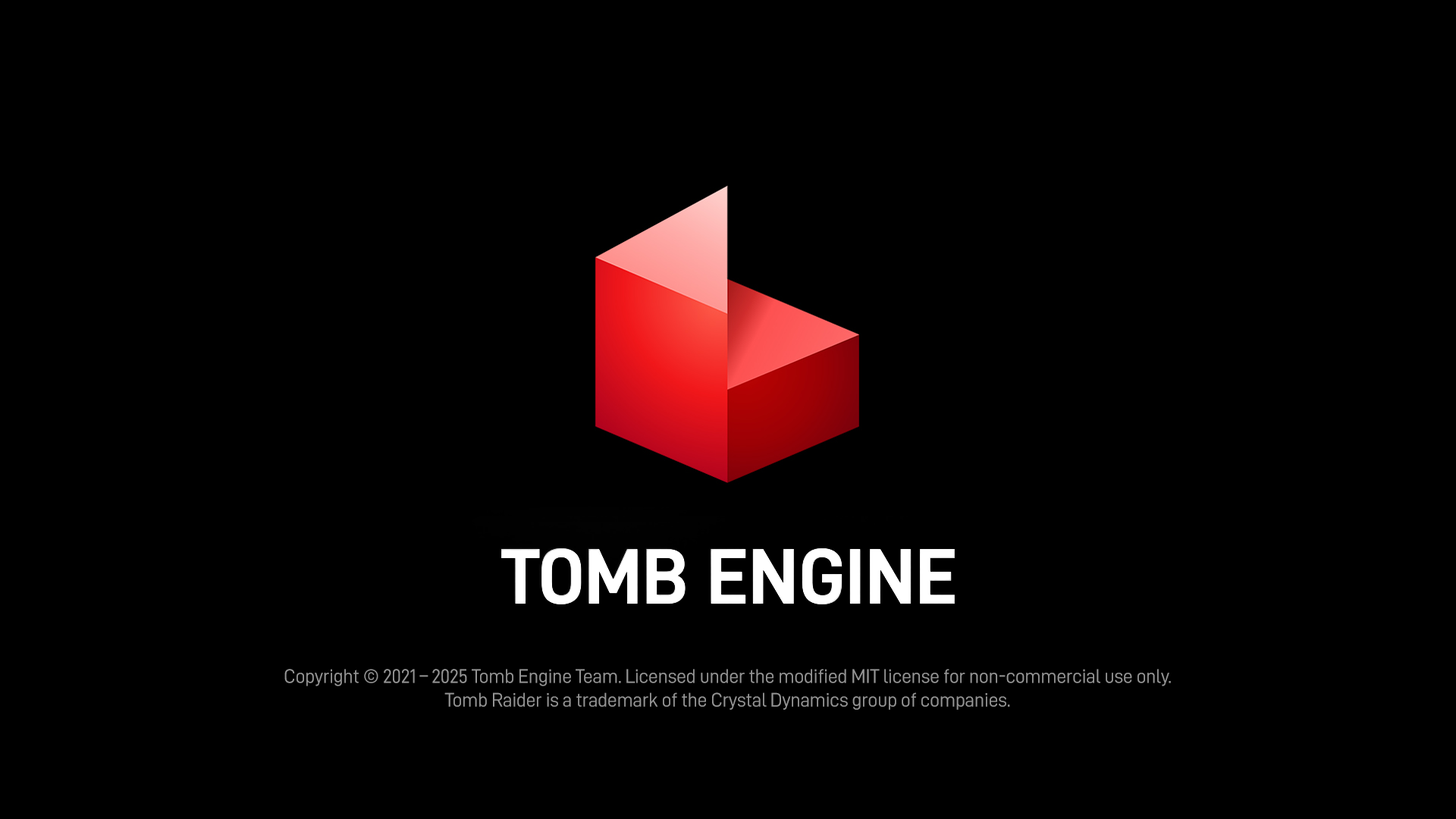
<style>
.page{position:relative;width:1456px;height:819px;background:#000000}
.page>*{position:absolute;margin:0}
.t1{font:19.7px "D-DIN";letter-spacing:-0.02em;color:#949494}
</style>
<div class="page">
<p class="t1" style="left:284px;top:669px;width:887px;height:41px;text-align:center">Copyright © 2021 – 2025 Tomb Engine Team. Licensed under the modified MIT license for non-commercial use only.<br>Tomb Raider is a trademark of the Crystal Dynamics group of companies.</p>
</div>
